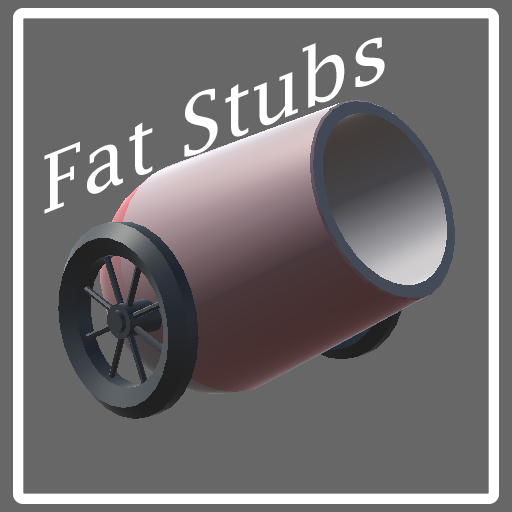
<style>
.page{position:relative;width:512px;height:512px;background:#676767}
.page>*{position:absolute;margin:0}
.t1{font:80px "LucidaFax";color:#ffffff}
</style>
<div class="page">
<p class="t1" style="left:44px;top:37px;width:341px;height:177px;rotate:-22deg">Fat Stubs</p>
</div>
